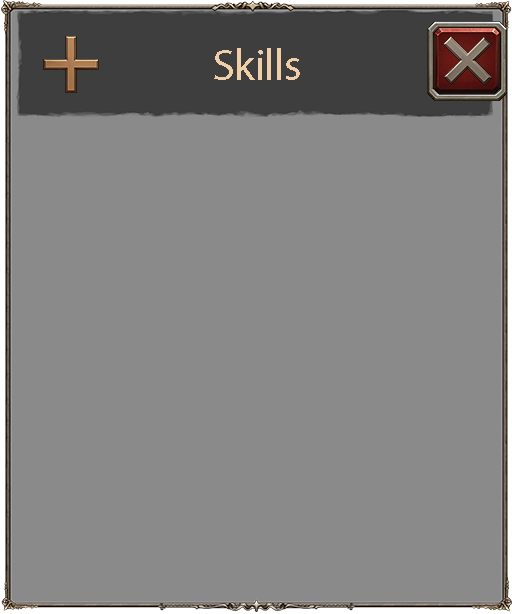
<style>
.page{position:relative;width:512px;height:614px;background:#8a8a8a}
.page>*{position:absolute;margin:0}
.t1{font:44.2px "MyriadPro-Regular";color:#f1ceaa}
</style>
<div class="page">
<p class="t1" style="left:214px;top:48px;width:86px;height:32px">Skills</p>
</div>
